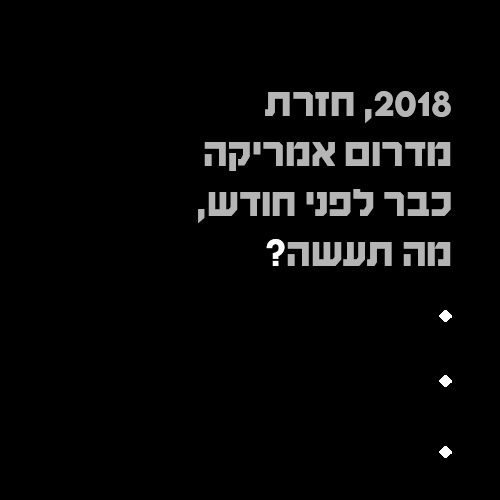
<style>
.page{position:relative;width:500px;height:500px;background:#000000}
.page>*{position:absolute;margin:0}
.t1{font:41.7px "HaimG-Regular";color:#b5b5b5}
.t2{font:41.7px "HaimG-Regular";color:#ffffff}
</style>
<div class="page">
<p class="t1" style="left:198px;top:91px;width:253px;height:175px">2018, חזרת מדרום אמריקה <br>כבר לפני חודש, מה תעשה<span class="t2">?</span></p>
</div>
